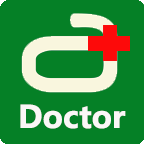
<style>
.page{position:relative;width:144px;height:144px;background:#058026}
.page>*{position:absolute;margin:0}
.t1{font:33.3px "NirmalaUI-Bold";color:#fbf7f7}
</style>
<div class="page">
<p class="t1" style="left:20px;top:104px;width:106px;height:25px">Doctor</p>
</div>
